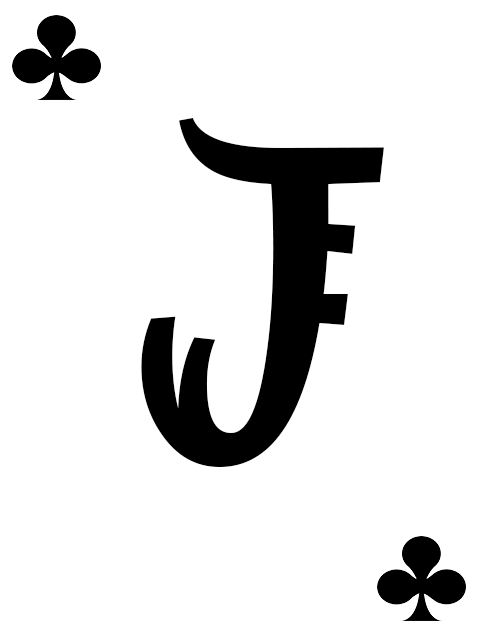
<style>
.page{position:relative;width:480px;height:640px;background:#ffffff}
.page>*{position:absolute;margin:0}
.t1{font:386.3px "Jokerman-Regular";color:#000000}
</style>
<div class="page">
<p class="t1" style="left:141px;top:118px;width:243px;height:349px">J</p>
</div>
